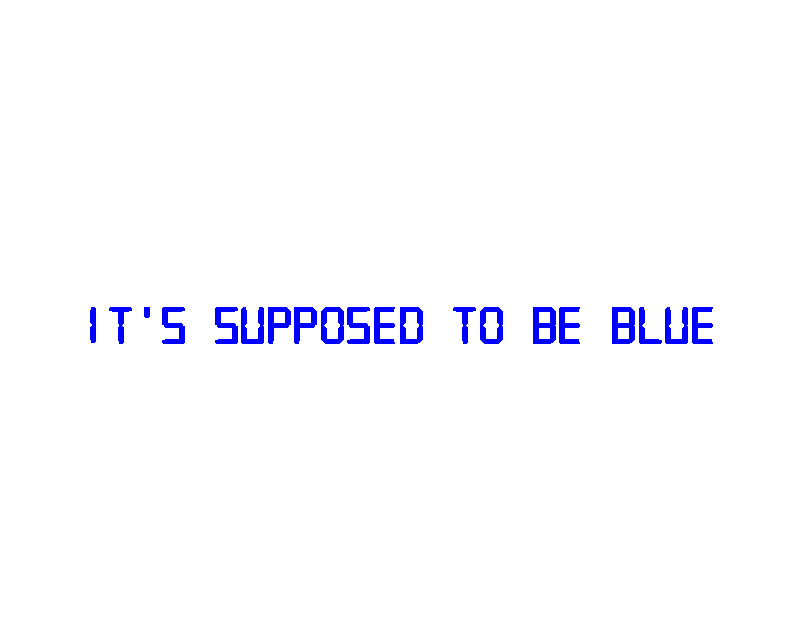
<style>
.page{position:relative;width:800px;height:640px;background:#ffffff}
.page>*{position:absolute;margin:0}
.t1{font:55px "Digital-7Mono";color:#0000ff;font-weight:bold}
</style>
<div class="page">
<p class="t1" style="left:90px;top:307px;width:623px;height:37px">It’s Supposed to Be Blue</p>
</div>
